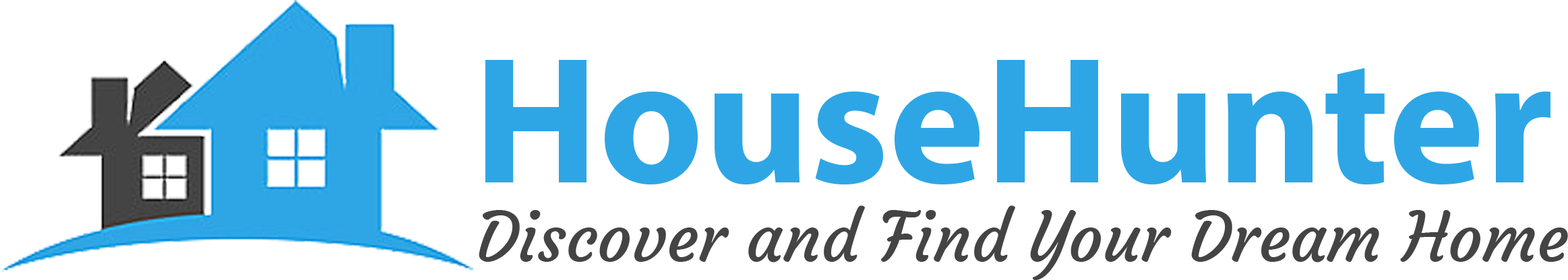
<style>
.page{position:relative;width:1568px;height:280px;background:#ffffff}
.page>*{position:absolute;margin:0}
.t1{font:182.2px "MyriadPro-Bold";color:#2ea6e5}
.t2{font:67.4px "Courgette-Regular";color:#444444}
</style>
<div class="page">
<p class="t1" style="left:485px;top:60px;width:1065px;height:125px">HouseHunter</p>
<p class="t2" style="left:479px;top:206px;width:1089px;height:74px">Discover and Find Your Dream Home</p>
</div>
